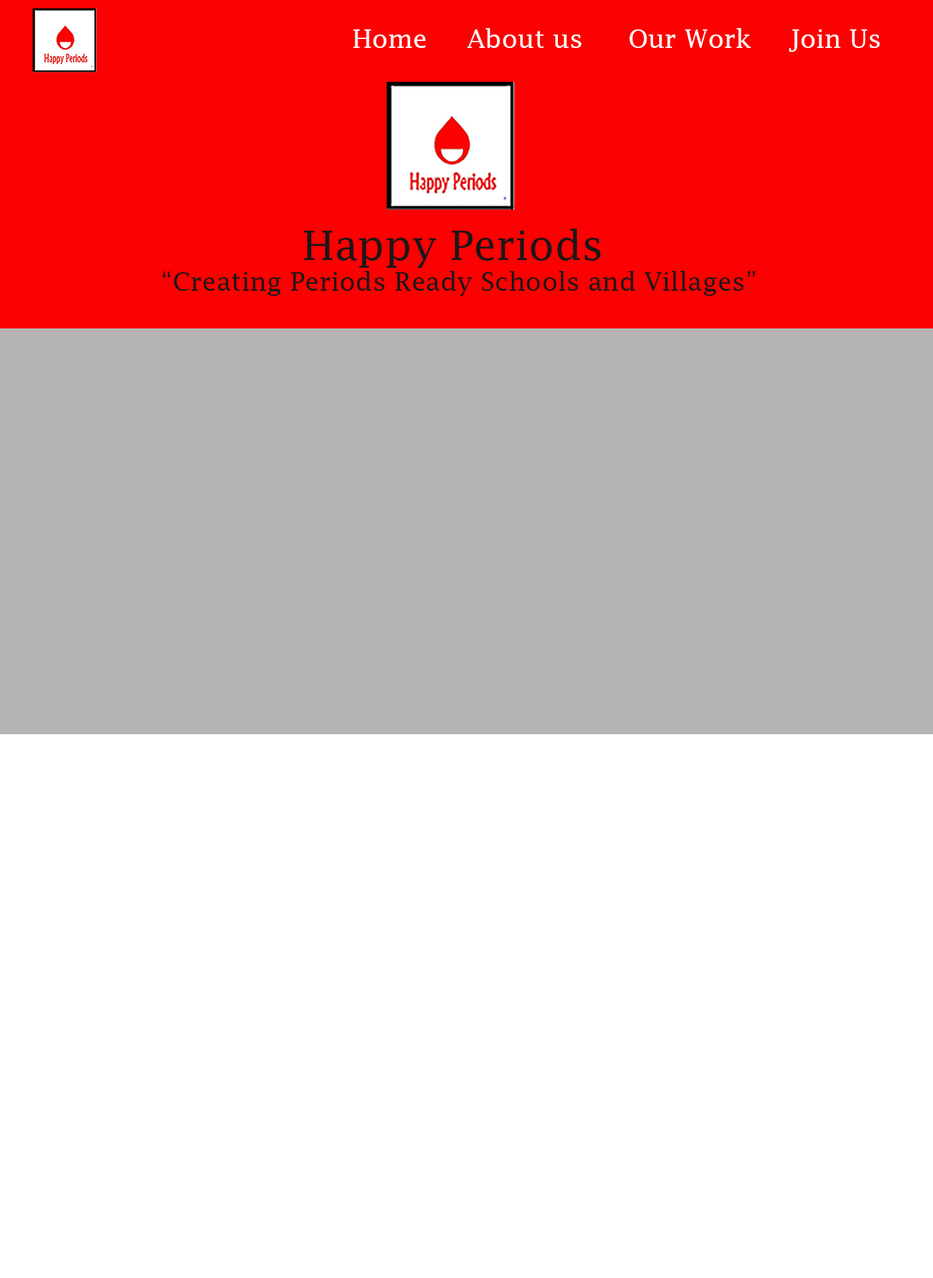
<style>
.page{position:relative;width:933px;height:1278px;background:#ffffff}
.page>*{position:absolute;margin:0}
.t1{font:25.6px "LucidaFax";color:#fdfdfd}
.t2{font:25.6px "LucidaFax";color:#1b1717}
.t3{font:40.9px "LucidaFax";color:#1b1717}
</style>
<div class="page">
<p class="t1" style="left:353px;top:28px;width:527px;height:24px">Home  About us  Our Work  Join Us</p>
<p class="t2" style="left:162px;top:229px;width:593px;height:67px"><span class="t3">           Happy Periods<br></span>“Creating Periods Ready Schools and Villages”</p>
</div>
